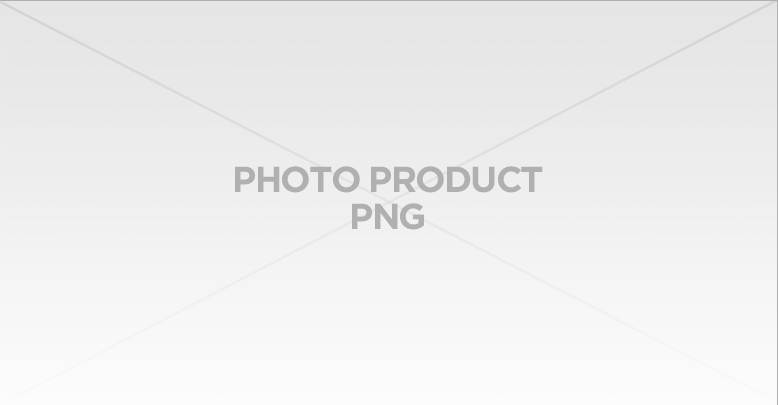
<style>
.page{position:relative;width:778px;height:405px}
.page>*{position:absolute;margin:0}
.t1{font:36.1px/37.5px "GothamBold";letter-spacing:-0.05em;color:#b1b0b0}
</style>
<div class="page">
<p class="t1" style="left:235px;top:166px;width:308px;height:64px;text-align:center">PHOTO PRODUCT<br>PNG</p>
</div>
